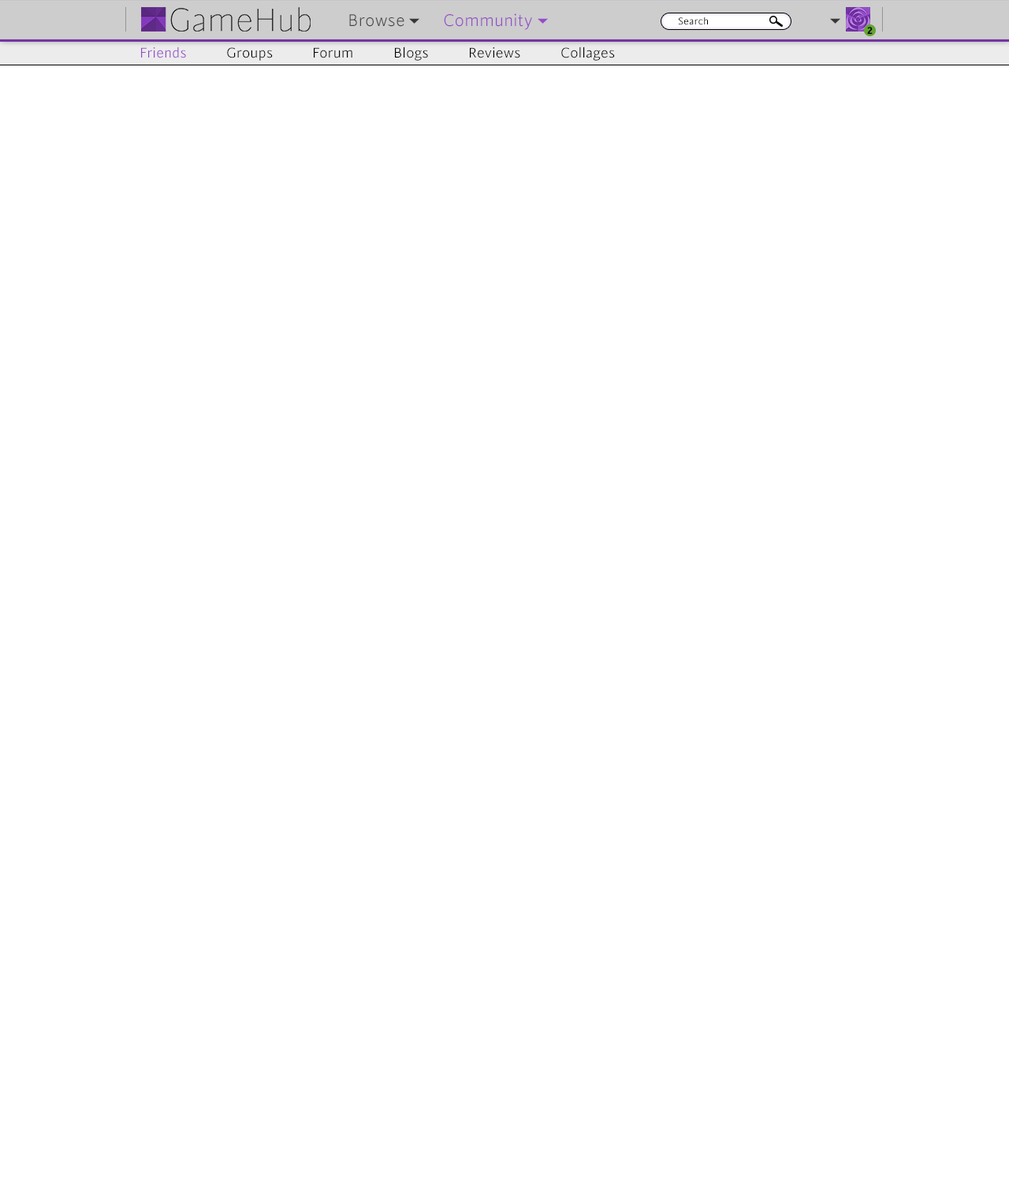
<style>
.page{position:relative;width:1009px;height:1182px;background:#ffffff}
.page>*{position:absolute;margin:0}
.t1{font:18.9px "CintaLight";color:#464646}
.t2{font:18.9px "CintaLight";color:#924cc8}
.t3{font:11px "CintaBook";color:#000000}
.t4{font:11px "CintaRegular-Bold";color:#000000}
.t5{font:15.8px "CintaLight";color:#924cc8}
.t6{font:15.8px "CintaLight";color:#000000}
</style>
<div class="page">
<p class="t1" style="left:349px;top:14px;width:55px;height:13px">Browse</p>
<p class="t2" style="left:444px;top:13px;width:88px;height:17px">Community</p>
<p class="t3" style="left:678px;top:17px;width:30px;height:8px">Search</p>
<p class="t4" style="left:867px;top:27px;width:5px;height:7px">2</p>
<p class="t5" style="left:141px;top:46px;width:45px;height:12px">Friends</p>
<p class="t6" style="left:227px;top:47px;width:46px;height:14px">Groups</p>
<p class="t6" style="left:314px;top:47px;width:38px;height:11px">Forum</p>
<p class="t6" style="left:395px;top:46px;width:33px;height:15px">Blogs</p>
<p class="t6" style="left:470px;top:47px;width:50px;height:11px">Reviews</p>
<p class="t6" style="left:561px;top:46px;width:54px;height:15px">Collages</p>
</div>
